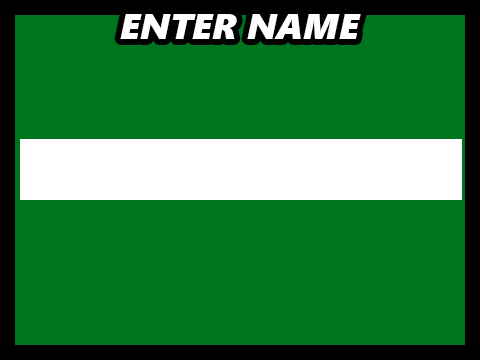
<style>
.page{position:relative;width:480px;height:360px;background:#007520}
.page>*{position:absolute;margin:0}
.t1{font:36px "SegoeUIBlack-Italic";color:#ffffff}
</style>
<div class="page">
<p class="t1" style="left:120px;top:14px;width:241px;height:25px">ENTER NAME</p>
</div>
